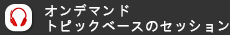
<style>
.page{position:relative;width:230px;height:35px;background:#333333}
.page>*{position:absolute;margin:0}
.t1{font:14px/15px "MicrosoftJhengHeiRegular";color:#ffffff;font-weight:bold}
</style>
<div class="page">
<p class="t1" style="left:45px;top:4px;width:184px;height:29px">オンデマンド<br>トピックベースのセッション</p>
</div>
